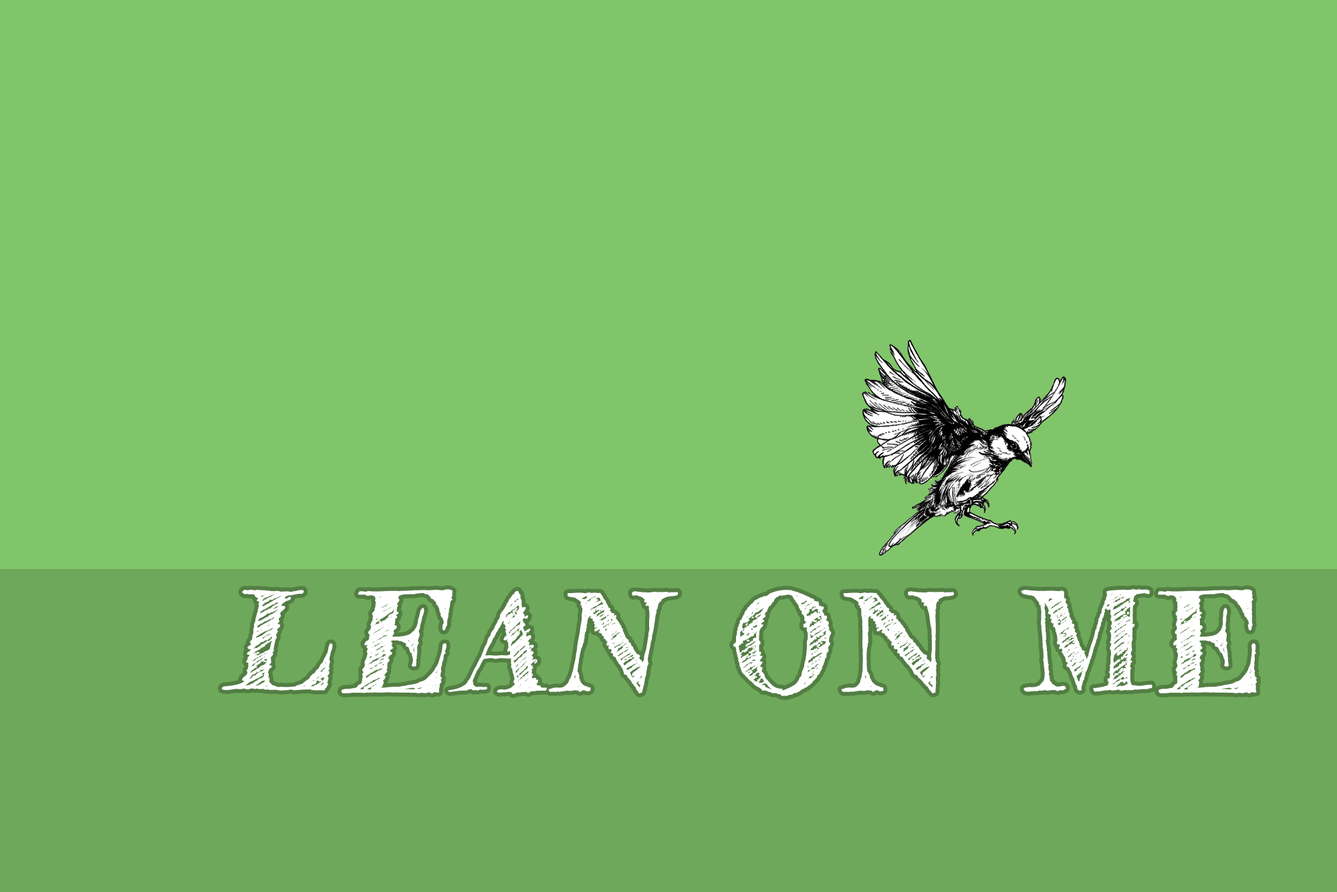
<style>
.page{position:relative;width:1337px;height:892px;background:#81c56a}
.page>*{position:absolute;margin:0}
.t1{font:133.7px "FrederickatheGreat-Regular";letter-spacing:0.08em;color:#ffffff;font-weight:bold}
.t2{font:133.7px "FrederickatheGreat-Regular";letter-spacing:0.08em;color:#ffffff;font-weight:bold;font-style:italic}
</style>
<div class="page">
<p class="t1" style="left:221px;top:589px;width:1037px;height:107px"><span class="t2">LEAN</span> ON ME</p>
</div>
